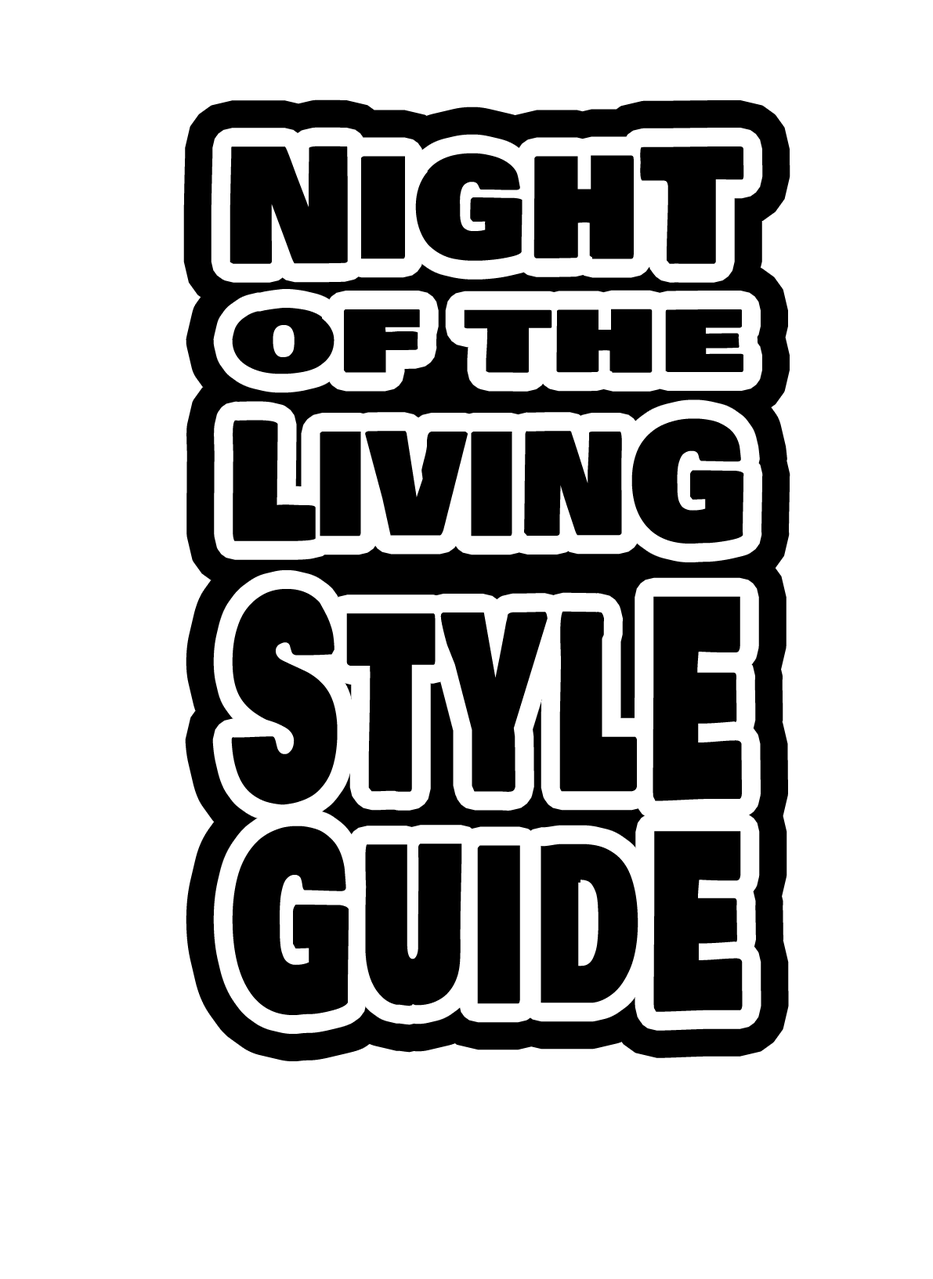
<style>
.page{position:relative;width:933px;height:1279px;background:#ffffff}
.page>*{position:absolute;margin:0}
.t1{font:156.6px "BowlbyOneSC-Regular";color:#000000}
.t2{font:96px "BowlbyOneSC-Regular";color:#000000;scale:1.56 1}
.t3{font:159.7px "BowlbyOneSC-Regular";color:#000000;scale:0.91 1}
.t4{font:273.1px "BowlbyOneSC-Regular";letter-spacing:0.06em;color:#000000;scale:0.56 1}
.t5{font:241.7px "BowlbyOneSC-Regular";letter-spacing:0.04em;color:#000000;scale:0.62 1}
</style>
<div class="page">
<p class="t1" style="left:229px;top:146px;width:515px;height:118px">NighT</p>
<p class="t2" style="left:232px;top:308px;width:511px;height:66px">of the</p>
<p class="t3" style="left:233px;top:418px;width:511px;height:125px">LivinG</p>
<p class="t4" style="left:231px;top:589px;width:511px;height:216px">StylE</p>
<p class="t5" style="left:232px;top:825px;width:510px;height:190px">GuidE</p>
</div>
